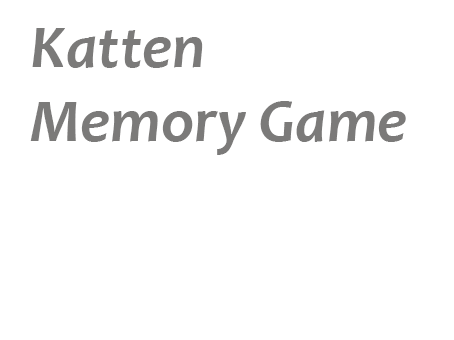
<style>
.page{position:relative;width:454px;height:340px;background:#ffffff}
.page>*{position:absolute;margin:0}
.t1{font:62px "Candara-BoldItalic";color:#7b7a79}
</style>
<div class="page">
<p class="t1" style="left:30px;top:28px;width:376px;height:127px">Katten<br>Memory Game</p>
</div>
